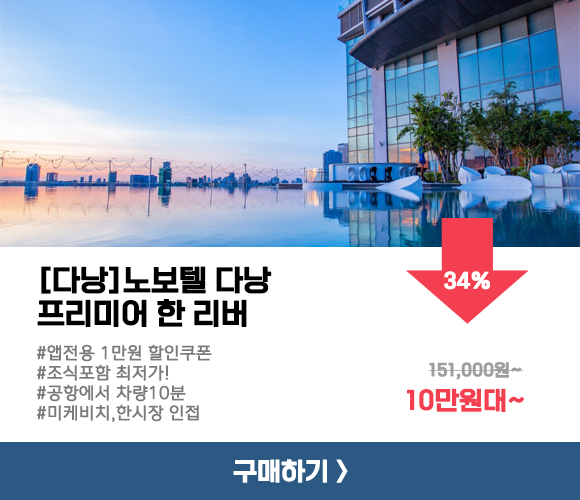
<style>
.page{position:relative;width:580px;height:500px;background:#ffffff}
.page>*{position:absolute;margin:0}
.t1{font:29.2px/33.3px "ONEMobileTitleOTFRegular";letter-spacing:-0.01em;color:#000000;font-weight:bold}
.t2{font:20.8px "ONEMobileTitleOTFRegular";letter-spacing:-0.01em;color:#ffffff;font-weight:bold}
.t3{font:16.7px "ONEMobileOTFRegular";letter-spacing:-0.01em;color:#7c7979;font-weight:bold}
.t4{font:16.7px "ONEMobileTitleOTFRegular";letter-spacing:-0.01em;color:#9f9d9d;font-weight:bold}
.t5{font:25px "ONEMobileTitleOTFRegular";letter-spacing:-0.01em;color:#f33f50;font-weight:bold}
</style>
<div class="page">
<p class="t1" style="left:37px;top:266px;width:235px;height:61px">[다낭]노보텔 다낭<br>프리미어 한 리버</p>
<p class="t2" style="left:444px;top:271px;width:46px;height:19px">34%</p>
<p class="t3" style="left:37px;top:344px;width:175px;height:78px">#앱전용 1만원 할인쿠폰<br>#조식포함 최저가!<br>#공항에서 차량10분<br>#미케비치,한시장 인접</p>
<p class="t4" style="left:429px;top:362px;width:95px;height:18px">151,000원~</p>
<p class="t5" style="left:407px;top:388px;width:118px;height:24px">10만원대~</p>
</div>
